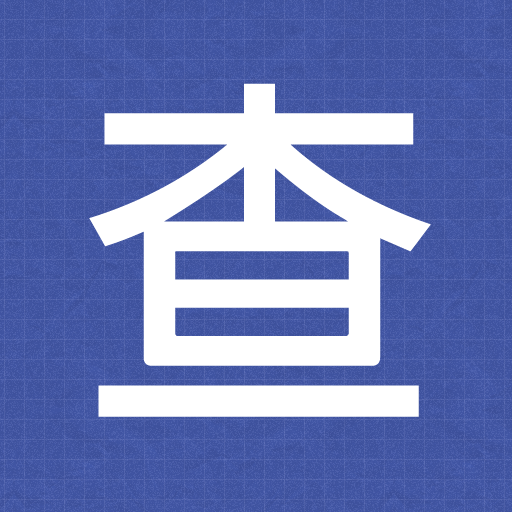
<style>
.page{position:relative;width:512px;height:512px;background:#ffffff}
.page>*{position:absolute;margin:0}
.t1{font:366.7px "AdobeFanHeitiStd-Bold";color:#ffffff}
</style>
<div class="page">
<p class="t1" style="left:89px;top:83px;width:342px;height:334px">查</p>
</div>
